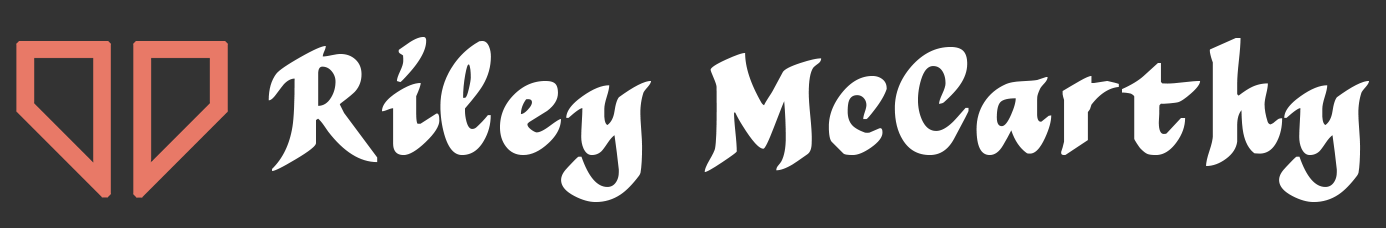
<style>
.page{position:relative;width:1386px;height:228px;background:#333333}
.page>*{position:absolute;margin:0}
.t1{font:144px "MothproofScript";color:#ffffff}
</style>
<div class="page">
<p class="t1" style="left:268px;top:37px;width:1101px;height:165px">Riley McCarthy</p>
</div>
